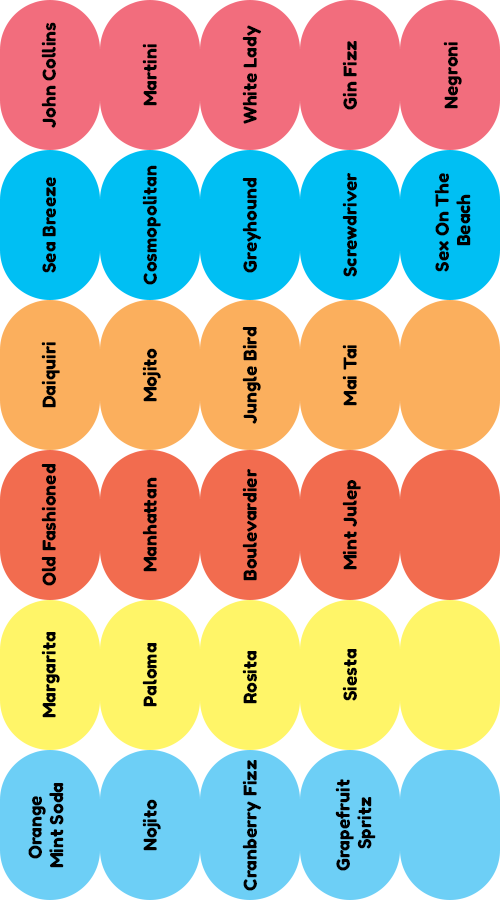
<style>
.page{position:relative;width:500px;height:900px}
.page>*{position:absolute;margin:0}
.t1{font:18px "FredokaOne-Regular";color:#000000}
</style>
<div class="page">
<p class="t1" style="left:41px;top:22px;width:15px;height:106px;rotate:-90deg">John Collins</p>
<p class="t1" style="left:242px;top:25px;width:19px;height:99px;rotate:-90deg">White Lady</p>
<p class="t1" style="left:342px;top:41px;width:15px;height:69px;rotate:-90deg">Gin Fizz</p>
<p class="t1" style="left:142px;top:44px;width:15px;height:62px;rotate:-90deg">Martini</p>
<p class="t1" style="left:443px;top:42px;width:19px;height:67px;rotate:-90deg">Negroni</p>
<p class="t1" style="left:142px;top:165px;width:19px;height:120px;rotate:-90deg">Cosmopolitan</p>
<p class="t1" style="left:342px;top:173px;width:15px;height:104px;rotate:-90deg">Screwdriver</p>
<p class="t1" style="left:434px;top:173px;width:37px;height:99px;text-align:center;rotate:-90deg">Sex On The <br>Beach</p>
<p class="t1" style="left:42px;top:177px;width:14px;height:96px;rotate:-90deg">Sea Breeze</p>
<p class="t1" style="left:242px;top:178px;width:19px;height:95px;rotate:-90deg">Greyhound</p>
<p class="t1" style="left:242px;top:327px;width:19px;height:97px;rotate:-90deg">Jungle Bird</p>
<p class="t1" style="left:41px;top:342px;width:19px;height:66px;rotate:-90deg">Daiquiri</p>
<p class="t1" style="left:142px;top:348px;width:19px;height:54px;rotate:-90deg">Mojito</p>
<p class="t1" style="left:342px;top:345px;width:15px;height:61px;rotate:-90deg">Mai Tai</p>
<p class="t1" style="left:41px;top:464px;width:15px;height:122px;rotate:-90deg">Old Fashioned</p>
<p class="t1" style="left:242px;top:469px;width:15px;height:112px;rotate:-90deg">Boulevardier</p>
<p class="t1" style="left:142px;top:477px;width:15px;height:95px;rotate:-90deg">Manhattan</p>
<p class="t1" style="left:342px;top:480px;width:19px;height:90px;rotate:-90deg">Mint Julep</p>
<p class="t1" style="left:41px;top:632px;width:19px;height:86px;rotate:-90deg">Margarita</p>
<p class="t1" style="left:142px;top:643px;width:15px;height:64px;rotate:-90deg">Paloma</p>
<p class="t1" style="left:242px;top:651px;width:15px;height:53px;rotate:-90deg">Rosita</p>
<p class="t1" style="left:342px;top:649px;width:15px;height:52px;rotate:-90deg">Siesta</p>
<p class="t1" style="left:242px;top:760px;width:19px;height:131px;rotate:-90deg">Cranberry Fizz</p>
<p class="t1" style="left:28px;top:783px;width:36px;height:85px;text-align:center;rotate:-90deg">Orange <br>Mint Soda</p>
<p class="t1" style="left:335px;top:779px;width:41px;height:92px;text-align:center;rotate:-90deg">Grapefruit <br>Spritz</p>
<p class="t1" style="left:142px;top:799px;width:19px;height:52px;rotate:-90deg">Nojito</p>
</div>
